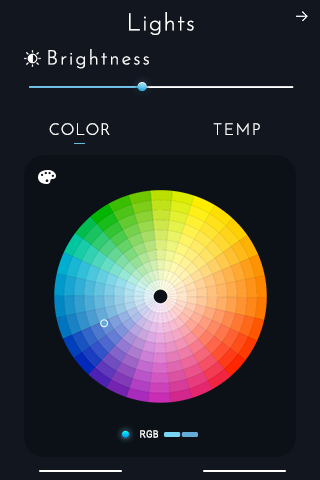
<style>
.page{position:relative;width:320px;height:480px;background:#11161f}
.page>*{position:absolute;margin:0}
.t1{font:24px "JosefinSans-Light";letter-spacing:0.05em;color:#ffffff}
.t2{font:20px "JosefinSans-Light";letter-spacing:0.1em;color:#ffffff}
.t3{font:16px "JosefinSans-Light";letter-spacing:0.05em;color:#ffffff}
.t4{font:16px "JosefinSans-Light";letter-spacing:0.1em;color:#ffffff;text-transform:uppercase}
.t5{font:10px "ArialNarrow";letter-spacing:0.05em;color:#ffffff}
</style>
<div class="page">
<p class="t1" style="left:129px;top:12px;width:65px;height:23px">Lights</p>
<p class="t2" style="left:48px;top:49px;width:101px;height:20px">Brightness</p>
<p class="t3" style="left:49px;top:123px;width:61px;height:12px">COLOR</p>
<p class="t4" style="left:213px;top:123px;width:47px;height:12px">TEMP</p>
<p class="t5" style="left:140px;top:430px;width:19px;height:8px">RGB</p>
</div>
